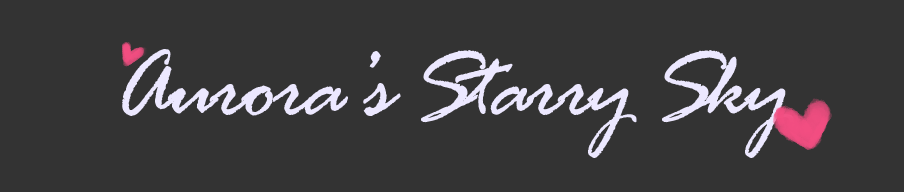
<style>
.page{position:relative;width:904px;height:192px;background:#333333}
.page>*{position:absolute;margin:0}
.t1{font:100px "RageItalic";letter-spacing:-0.05em;color:#ece8ff}
</style>
<div class="page">
<p class="t1" style="left:122px;top:49px;width:672px;height:109px">Aurora’s Starry Sky</p>
</div>
